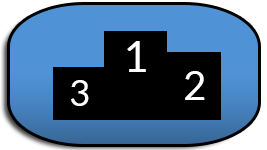
<style>
.page{position:relative;width:267px;height:150px;background:#000000}
.page>*{position:absolute;margin:0}
.t1{font:42.9px "Lato-Regular";color:#ffffff}
.t2{font:40.2px "Lato-Regular";color:#ffffff}
.t3{font:35.9px "Lato-Regular";color:#ffffff}
</style>
<div class="page">
<p class="t1" style="left:127px;top:41px;width:19px;height:31px">1</p>
<p class="t2" style="left:185px;top:71px;width:20px;height:29px">2</p>
<p class="t3" style="left:71px;top:80px;width:18px;height:26px">3</p>
</div>
